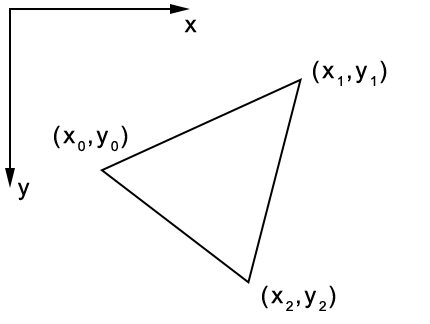
<style>
.page{position:relative;width:430px;height:324px;background:#ffffff}
.page>*{position:absolute;margin:0}
.t1{font:23.7px "ArialMT";letter-spacing:0.113em;color:#000000}
</style>
<div class="page">
<p class="t1" style="left:184px;top:19px;width:13px;height:14px">x</p>
<p class="t1" style="left:313px;top:60px;width:74px;height:26px">(x1,y1)</p>
<p class="t1" style="left:54px;top:125px;width:74px;height:27px">(x0,y0)</p>
<p class="t1" style="left:18px;top:182px;width:12px;height:19px">y</p>
<p class="t1" style="left:262px;top:285px;width:74px;height:26px">(x2,y2)</p>
</div>
